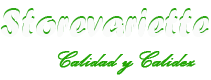
<style>
.page{position:relative;width:211px;height:80px;background:#ffffff}
.page>*{position:absolute;margin:0}
.t1{font:40px "ForteMT";color:#fafbfa}
.t2{font:30px "PalaceScriptMT";color:#23a505;font-weight:bold}
</style>
<div class="page">
<p class="t1" style="left:0px;top:8px;width:209px;height:27px">Storevariette</p>
<p class="t2" style="left:57px;top:51px;width:139px;height:24px">Calidad y Calidez</p>
</div>
